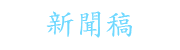
<style>
.page{position:relative;width:180px;height:50px;background:#ffffff}
.page>*{position:absolute;margin:0}
.t1{font:30px "DFKaiShu-SB-Estd-BF";color:#6fd8ff}
</style>
<div class="page">
<p class="t1" style="left:46px;top:11px;width:86px;height:27px">新聞稿</p>
</div>
